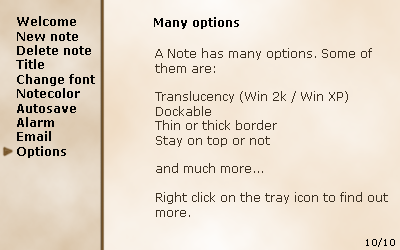
<style>
.page{position:relative;width:400px;height:250px}
.page>*{position:absolute;margin:0}
.t1{font:12px "Verdana-Bold";color:#010101}
.t2{font:12px "Verdana-Bold";color:#000000}
.t3{font:12px "Verdana";color:#3b3022}
.t4{font:9px "Verdana";color:#000000}
</style>
<div class="page">
<p class="t1" style="left:16px;top:16px;width:79px;height:142px">Welcome<br>New note<br>Delete note<br>Title<br>Change font<br>Notecolor<br>Autosave<br>Alarm<br>Email<br>Options</p>
<p class="t2" style="left:154px;top:17px;width:85px;height:12px">Many options</p>
<p class="t3" style="left:155px;top:48px;width:233px;height:169px">A Note has many options. Some of<br>them are:<br><br>Translucency (Win 2k / Win XP)<br>Dockable<br>Thin or thick border<br>Stay on top or not<br><br>and much more...<br><br>Right click on the tray icon to find out<br>more.</p>
<p class="t4" style="left:366px;top:238px;width:29px;height:9px">10/10</p>
</div>
